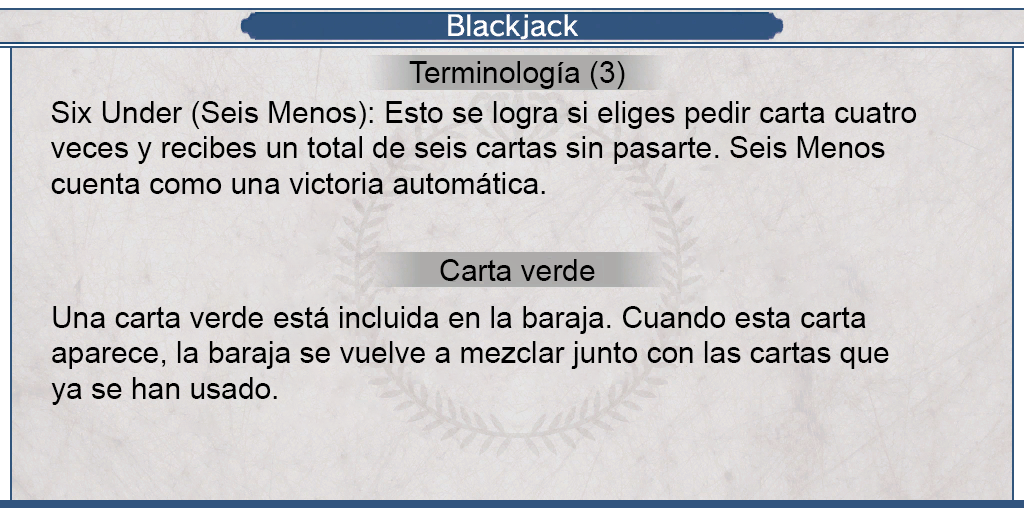
<style>
.page{position:relative;width:1024px;height:512px}
.page>*{position:absolute;margin:0}
.t1{font:30px "ArialMT";color:#000000}
.t2{font:29.9px "ArialMT";color:#000000}
.t3{font:29.6px "ArialMT";color:#000000}
</style>
<div class="page">
<p class="t1" style="left:409px;top:61px;width:216px;height:28px">Terminología (3)</p>
<p class="t2" style="left:51px;top:101px;width:866px;height:93px;text-align:justify">Six Under (Seis Menos): Esto se logra si eliges pedir carta cuatro<br>veces y recibes un total de seis cartas sin pasarte. Seis Menos<br>cuenta como una victoria automática.</p>
<p class="t3" style="left:440px;top:259px;width:155px;height:22px">Carta verde</p>
<p class="t2" style="left:51px;top:306px;width:838px;height:99px;text-align:justify">Una carta verde está incluida en la baraja. Cuando esta carta<br>aparece, la baraja se vuelve a mezclar junto con las cartas que<br>ya se han usado.</p>
</div>
